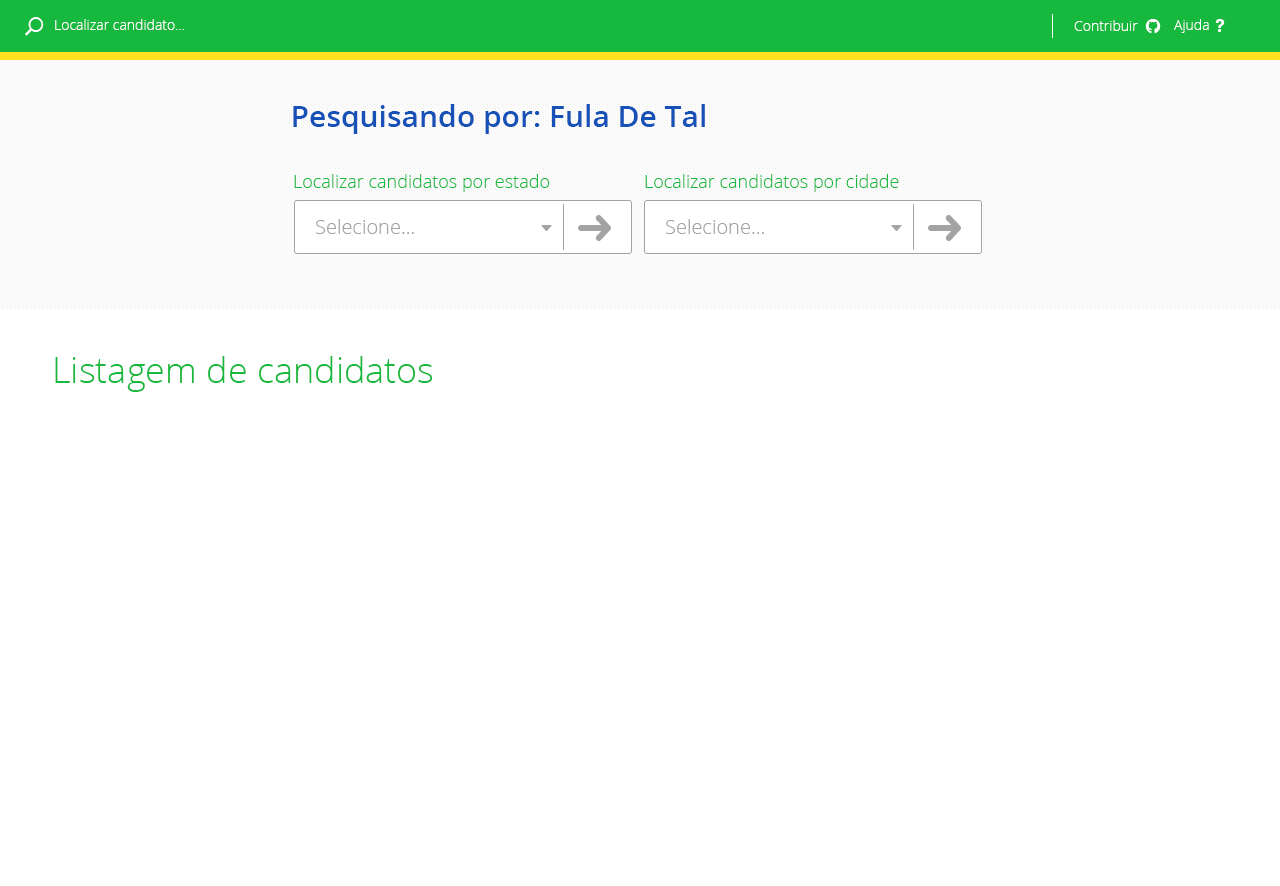
<style>
.page{position:relative;width:1280px;height:886px;background:#ffffff}
.page>*{position:absolute;margin:0}
.t1{font:14px "OpenSans-Light";color:#ffffff}
.t2{font:30px "OpenSans-Semibold";color:#1651b8}
.t3{font:18px "OpenSans-Light";color:#16b83e}
.t4{font:20px "OpenSans-Light";color:#a3a3a3}
.t5{font:36px "OpenSans-Light";color:#16b83e}
</style>
<div class="page">
<p class="t1" style="left:55px;top:19px;width:129px;height:11px">Localizar candidato...</p>
<p class="t1" style="left:1074px;top:20px;width:64px;height:11px">Contribuir</p>
<p class="t1" style="left:1174px;top:19px;width:35px;height:14px">Ajuda</p>
<p class="t2" style="left:293px;top:104px;width:412px;height:30px">Pesquisando por: Fula De Tal</p>
<p class="t3" style="left:294px;top:174px;width:256px;height:18px">Localizar candidatos por estado</p>
<p class="t3" style="left:645px;top:174px;width:254px;height:18px">Localizar candidatos por cidade</p>
<p class="t4" style="left:316px;top:219px;width:98px;height:15px">Selecione...</p>
<p class="t4" style="left:666px;top:219px;width:98px;height:15px">Selecione...</p>
<p class="t5" style="left:55px;top:356px;width:378px;height:36px">Listagem de candidatos</p>
</div>
